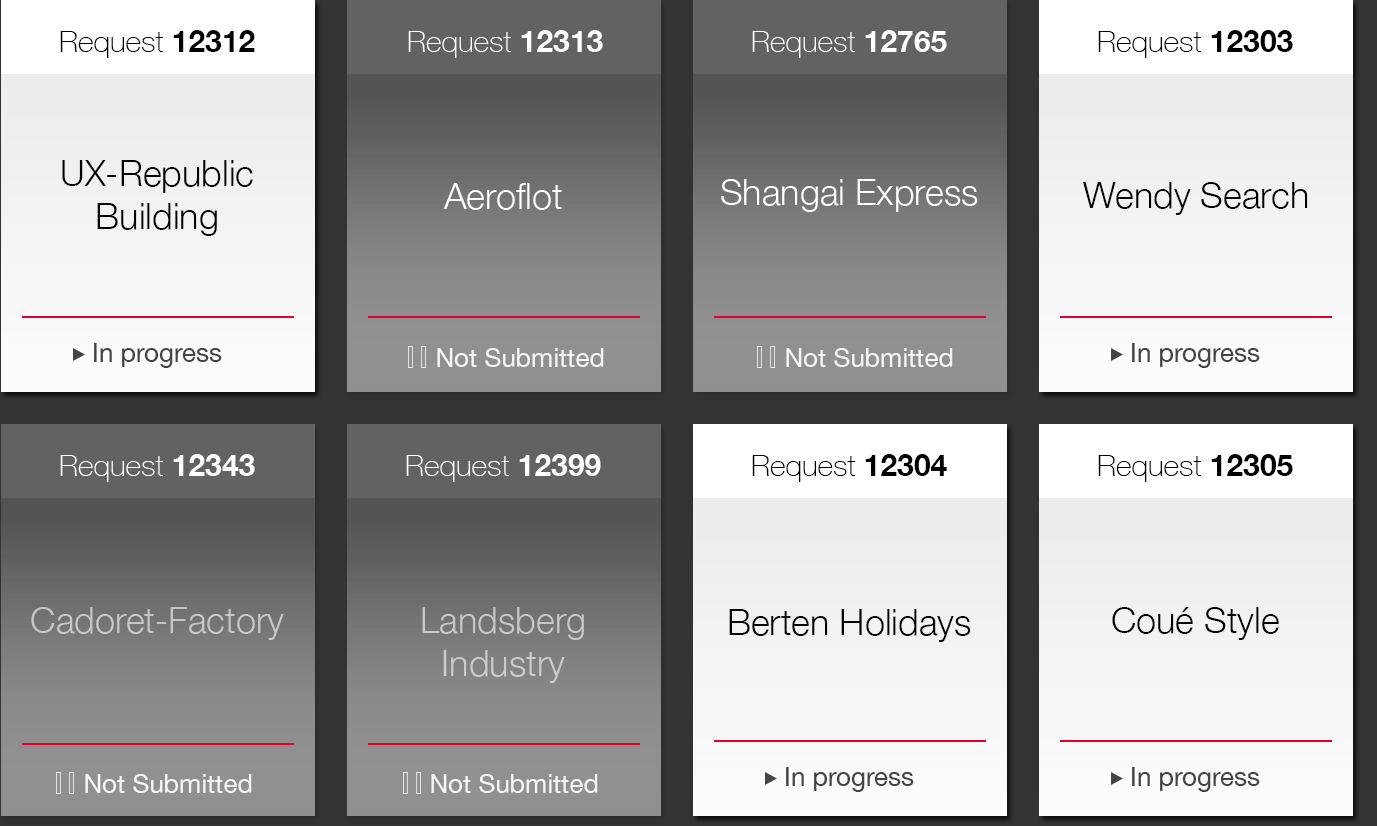
<style>
.page{position:relative;width:1377px;height:826px}
.page>*{position:absolute;margin:0}
.t1{font:30px "HelveticaNeue-Thin";color:#000000}
.t2{font:30px "HelveticaNeue-Bold";color:#000000}
.t3{font:30px "HelveticaNeue-Thin";color:#ffffff}
.t4{font:30px "HelveticaNeue-Bold";color:#ffffff}
.t5{font:36px "HelveticaNeue-Light";color:#000000}
.t6{font:36px "HelveticaNeue-Light";color:#ffffff}
.t7{font:26px "HelveticaNeue";color:#454444}
.t8{font:26px "HelveticaNeue";color:#f4f5f6}
.t9{font:36px "HelveticaNeue-Light";color:#c6c7c7}
.t10{font:36px "HelveticaNeue-Light";color:#c8c9c9}
</style>
<div class="page">
<p class="t1" style="left:60px;top:30px;width:195px;height:28px">Request <span class="t2">12312</span></p>
<p class="t3" style="left:408px;top:30px;width:195px;height:28px">Request <span class="t4">12313</span></p>
<p class="t3" style="left:752px;top:30px;width:195px;height:28px">Request <span class="t4">12765</span></p>
<p class="t1" style="left:1098px;top:30px;width:195px;height:28px">Request <span class="t2">12303</span></p>
<p class="t5" style="left:62px;top:160px;width:191px;height:76px;text-align:center">UX-Republic<br>Building</p>
<p class="t6" style="left:443px;top:183px;width:119px;height:27px">Aeroflot</p>
<p class="t6" style="left:721px;top:179px;width:257px;height:33px">Shangai Express</p>
<p class="t5" style="left:1083px;top:182px;width:225px;height:33px">Wendy Search</p>
<p class="t7" style="left:94px;top:343px;width:128px;height:25px">In progress</p>
<p class="t8" style="left:437px;top:348px;width:167px;height:19px">Not Submitted</p>
<p class="t8" style="left:786px;top:348px;width:167px;height:19px">Not Submitted</p>
<p class="t7" style="left:1132px;top:343px;width:128px;height:25px">In progress</p>
<p class="t3" style="left:60px;top:454px;width:195px;height:28px">Request <span class="t4">12343</span></p>
<p class="t3" style="left:406px;top:454px;width:195px;height:28px">Request <span class="t4">12399</span></p>
<p class="t1" style="left:752px;top:454px;width:195px;height:28px">Request <span class="t2">12304</span></p>
<p class="t1" style="left:1098px;top:454px;width:195px;height:28px">Request <span class="t2">12305</span></p>
<p class="t9" style="left:31px;top:607px;width:253px;height:33px">Cadoret-Factory</p>
<p class="t10" style="left:422px;top:607px;width:162px;height:76px;text-align:center">Landsberg<br>Industry</p>
<p class="t5" style="left:729px;top:609px;width:242px;height:33px">Berten Holidays</p>
<p class="t5" style="left:1112px;top:607px;width:167px;height:33px">Coué Style</p>
<p class="t8" style="left:85px;top:774px;width:167px;height:19px">Not Submitted</p>
<p class="t8" style="left:431px;top:774px;width:167px;height:19px">Not Submitted</p>
<p class="t7" style="left:786px;top:767px;width:128px;height:25px">In progress</p>
<p class="t7" style="left:1132px;top:767px;width:128px;height:25px">In progress</p>
</div>
